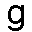
<style>
.page{position:relative;width:32px;height:32px;background:#ffffff}
.page>*{position:absolute;margin:0}
.t1{font:34.1px "Helvetica";color:#000000}
</style>
<div class="page">
<p class="t1" style="left:8px;top:5px;width:16px;height:26px">g</p>
</div>
